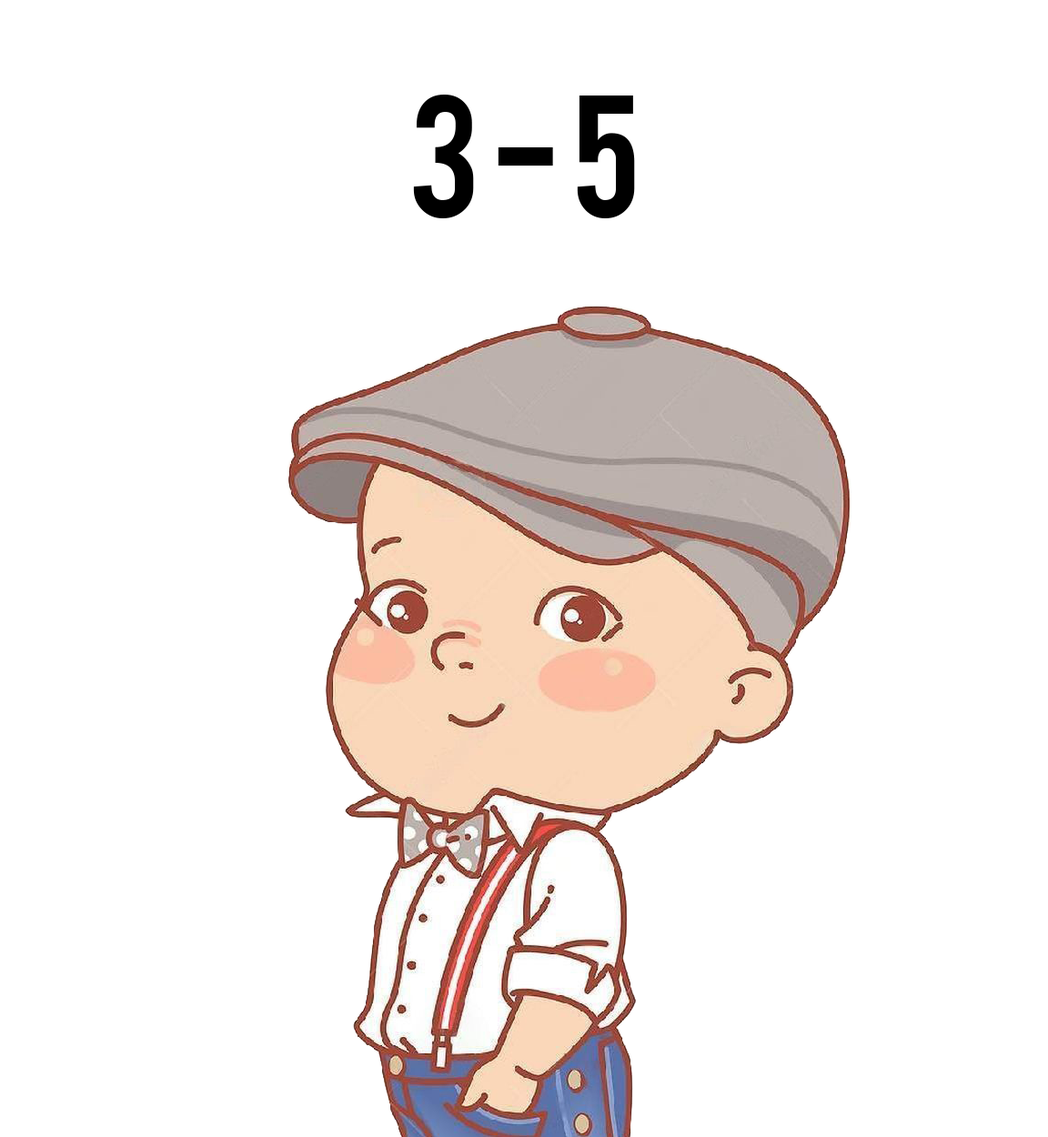
<style>
.page{position:relative;width:1048px;height:1137px;background:#ffffff}
.page>*{position:absolute;margin:0}
.t1{font:136.5px "Bebas";color:#000000}
</style>
<div class="page">
<p class="t1" style="left:413px;top:95px;width:222px;height:123px">3 - 5</p>
</div>
